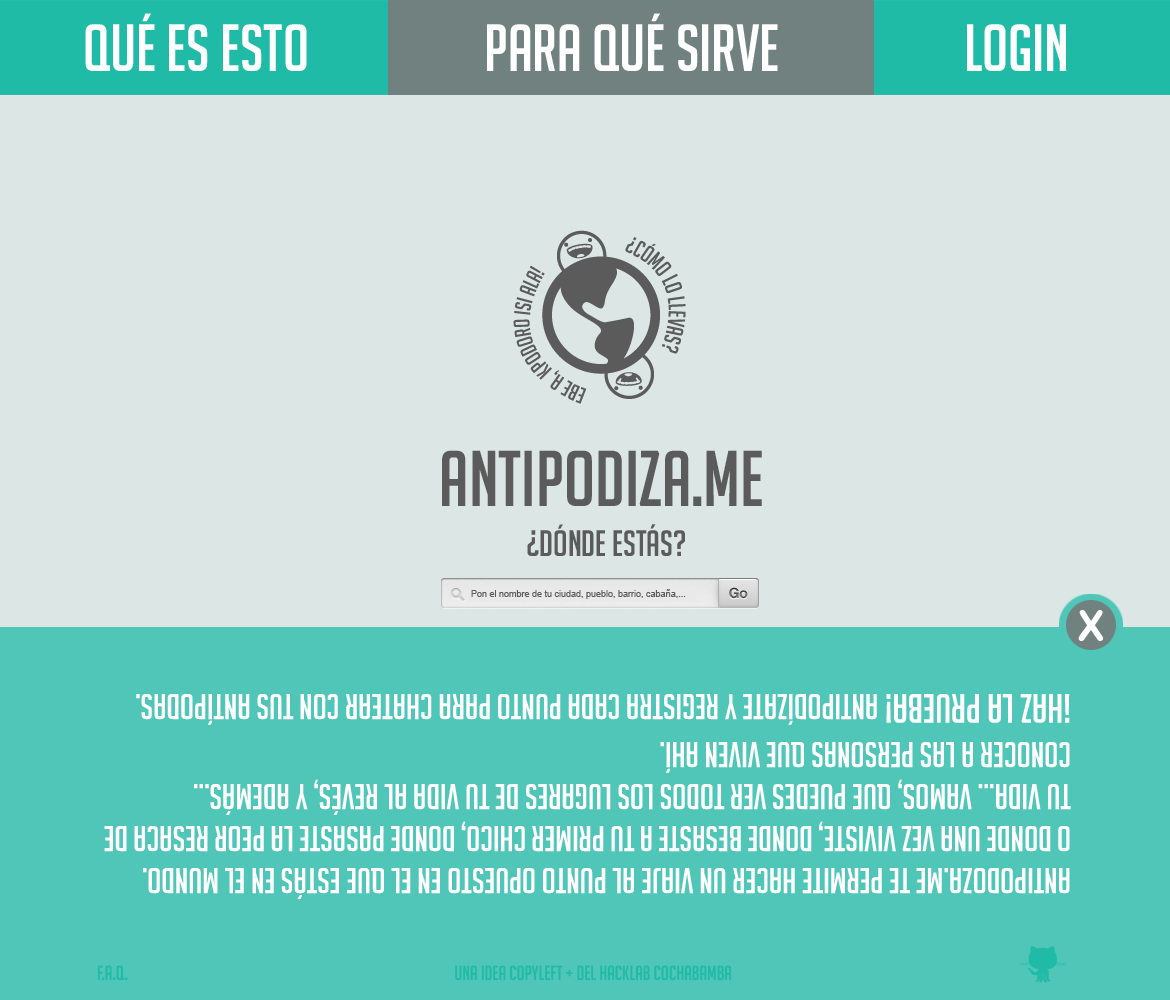
<style>
.page{position:relative;width:1170px;height:1000px;background:#dce6e5}
.page>*{position:absolute;margin:0}
.t1{font:65px "BigNoodleTitling";color:#ffffff}
.t2{font:77px "BigNoodleTitling";color:#5b5b5b}
.t3{font:35.8px "BigNoodleTitling";color:#5b5b5b}
.t4{font:9px "ArialMT";color:#5b5b5b}
.t5{font:43.3px "ArialRoundedMTBold";color:#ffffff}
.t6{font:35px "BigNoodleTitling";color:#ffffff}
.t7{font:40px "BigNoodleTitling";color:#ffffff}
.t8{font:20px "BigNoodleTitling";color:#20bba7}
</style>
<div class="page">
<p class="t1" style="left:85px;top:13px;width:222px;height:58px">QUÉ ES ESTO</p>
<p class="t1" style="left:487px;top:13px;width:291px;height:58px">PARA QUÉ SIRVE</p>
<p class="t1" style="left:967px;top:24px;width:99px;height:47px">LOGIN</p>
<p class="t2" style="left:442px;top:450px;width:320px;height:56px">ANTIPODIZA.ME</p>
<p class="t3" style="left:527px;top:524px;width:158px;height:32px">¿dónde estás?</p>
<p class="t4" style="left:471px;top:589px;width:215px;height:10px">Pon el nombre de tu ciudad, pueblo, barrio, cabaña,...</p>
<p class="t5" style="left:1078px;top:610px;width:26px;height:31px">X</p>
<p class="t6" style="left:104px;top:694px;width:967px;height:205px;text-align:justify;rotate:180deg">Antipodoza.me te permite hacer un viaje al punto opuesto en el que estás en el mundo.<br>O donde una vez viviste, donde besaste a tu primer chico, DOnde pasaste la peor resaca de tu vida... vamos, que puedes ver todos los LUgares de tu vida al revés, y además...<br>conocer a las personas que viven ahí.<br><span class="t7">¡Haz la prueba! </span>antipodízate y registra cada punto para chatear con tus antípODAS.</p>
<p class="t8" style="left:97px;top:965px;width:31px;height:16px">F.A.Q.</p>
<p class="t8" style="left:455px;top:965px;width:277px;height:16px">Una idea COPYLEFT + del hacklab cochabamba</p>
</div>
